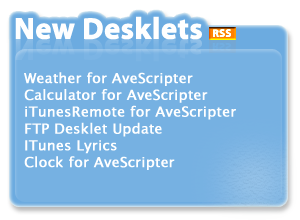
<style>
.page{position:relative;width:300px;height:220px;background:#76b1e2}
.page>*{position:absolute;margin:0}
.t1{font:14px "LucidaSansUnicode";color:#ffffff;font-weight:bold}
</style>
<div class="page">
<p class="t1" style="left:24px;top:72px;width:212px;height:98px">Weather for AveScripter<br>Calculator for AveScripter<br>iTunesRemote for AveScripter<br>FTP Desklet Update<br>ITunes Lyrics<br>Clock for AveScripter</p>
</div>
